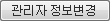
<style>
.page{position:relative;width:110px;height:21px}
.page>*{position:absolute;margin:0}
.t1{font:12px "Gulim";letter-spacing:-0.03em;color:#2c2c2c}
</style>
<div class="page">
<p class="t1" style="left:12px;top:5px;width:83px;height:11px">관리자 정보변경</p>
</div>
